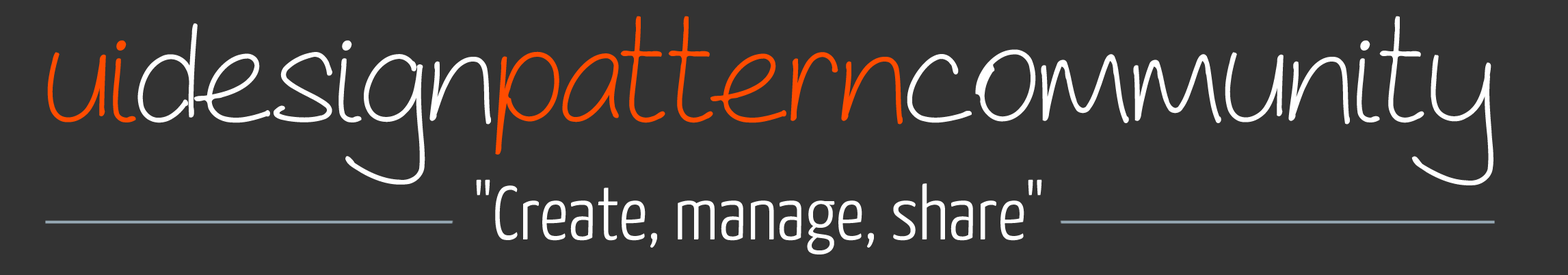
<style>
.page{position:relative;width:1568px;height:275px;background:#333333}
.page>*{position:absolute;margin:0}
.t1{font:123.1px "AsCuteAs-Regular";color:#ffffff}
.t2{font:123.1px "AsCuteAs-Regular";color:#ff4c00}
.t3{font:75.9px "YanoneKaffeesatz-Light";color:#ffffff}
</style>
<div class="page">
<p class="t1" style="left:47px;top:16px;width:1446px;height:169px"><span class="t2">ui</span>design<span class="t2">pattern</span>community</p>
<p class="t3" style="left:476px;top:179px;width:566px;height:75px">"Create, manage, share"</p>
</div>
